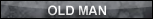
<style>
.page{position:relative;width:153px;height:19px}
.page>*{position:absolute;margin:0}
.t1{font:12.7px "Arial-BoldMT";color:#ffffff}
</style>
<div class="page">
<p class="t1" style="left:48px;top:5px;width:58px;height:11px">OLD MAN</p>
</div>
